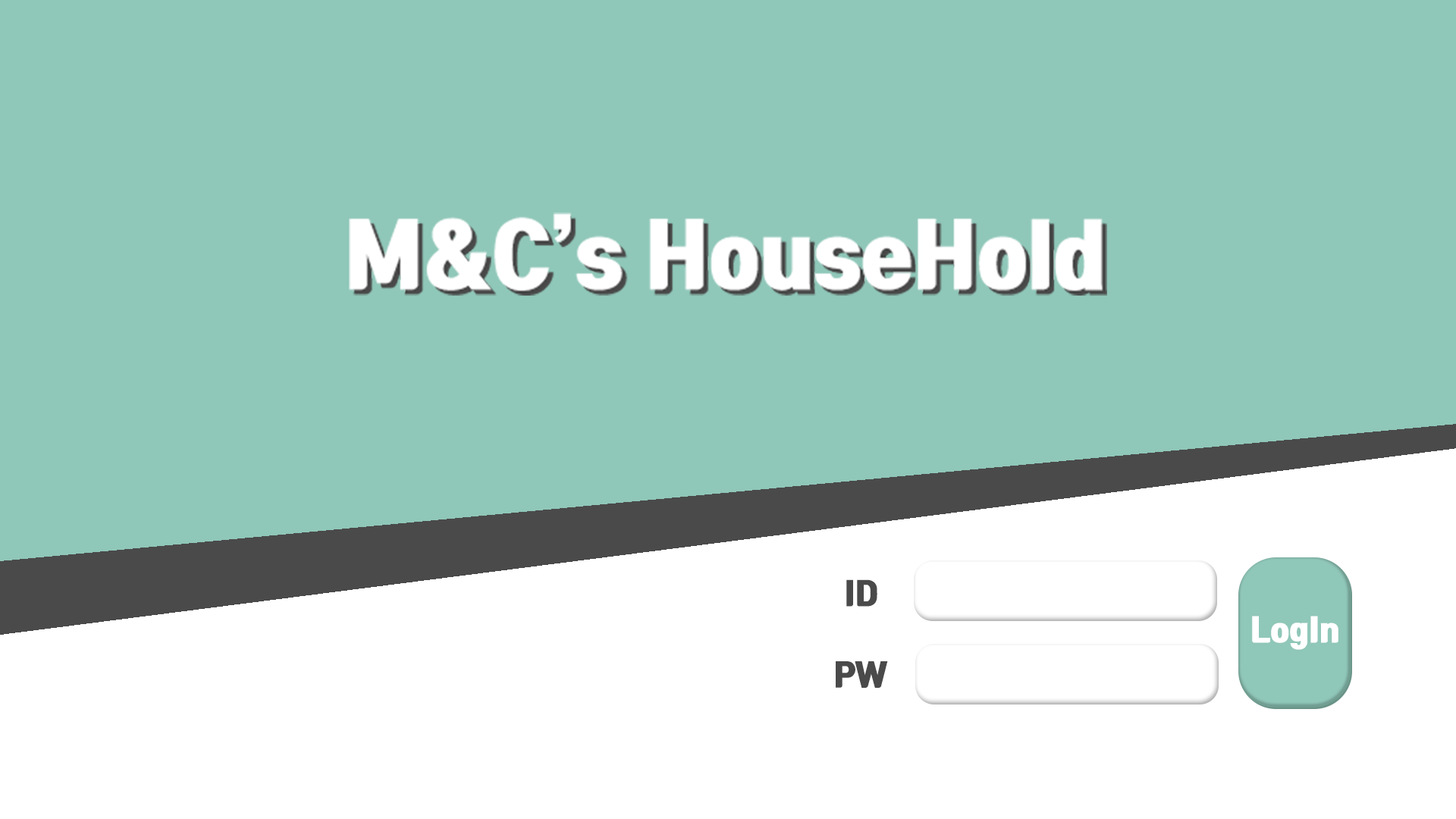
<style>
.page{position:relative;width:1456px;height:819px;background:#8fc7b8}
.page>*{position:absolute;margin:0}
.t1{font:30.3px "TmonMonsoriOTFBlack";color:#4a4a4a;scale:1.05 1}
.t2{font:30.3px "TmonMonsoriOTFBlack";color:#ffffff;scale:1.05 1}
</style>
<div class="page">
<p class="t1" style="left:846px;top:579px;width:31px;height:28px">ID</p>
<p class="t2" style="left:1252px;top:616px;width:86px;height:34px">LogIn</p>
<p class="t1" style="left:836px;top:661px;width:52px;height:27px">PW</p>
</div>
